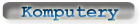
<style>
.page{position:relative;width:140px;height:24px}
.page>*{position:absolute;margin:0}
.t1{font:18px "CourierNewPS-BoldMT"}
</style>
<div class="page">
<p class="t1" style="left:21px;top:6px;width:98px;height:15px">Komputery</p>
</div>
